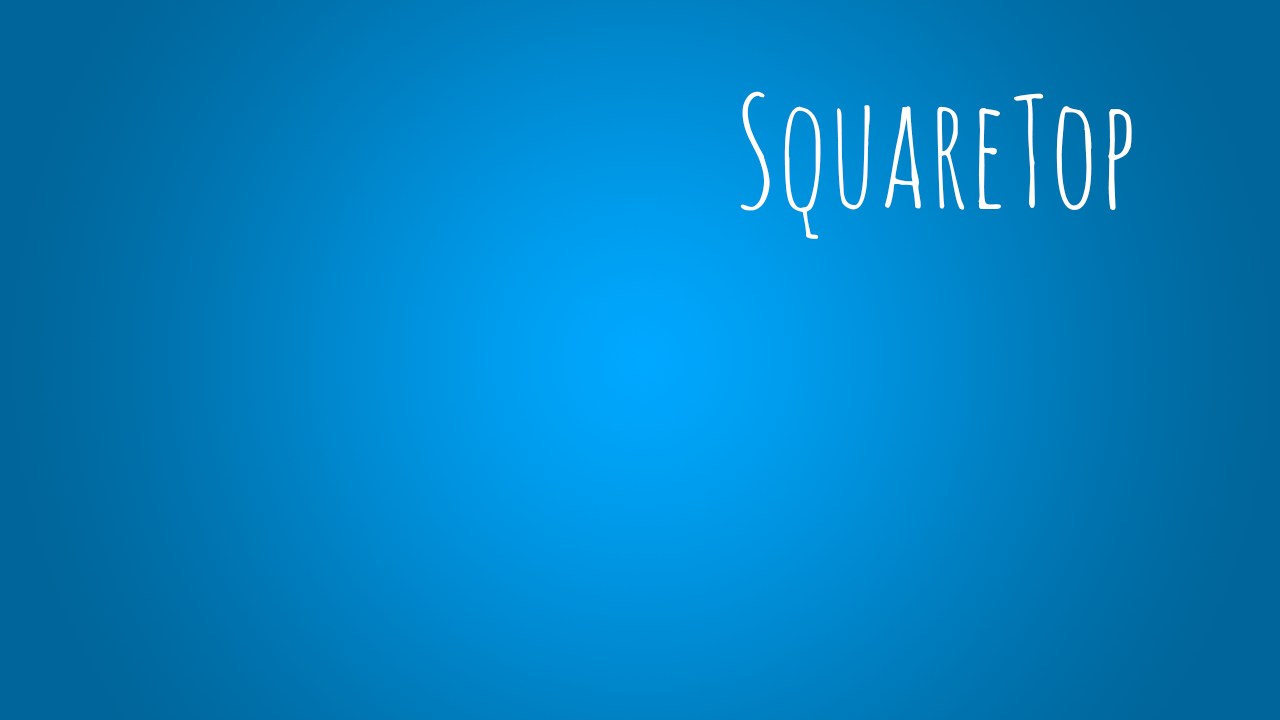
<style>
.page{position:relative;width:1280px;height:720px}
.page>*{position:absolute;margin:0}
.t1{font:150px "AmaticSC-Regular";letter-spacing:0.01em;color:#ffffff}
</style>
<div class="page">
<p class="t1" style="left:740px;top:91px;width:392px;height:148px">SquareTop</p>
</div>
